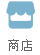
<style>
.page{position:relative;width:40px;height:55px;background:#ffffff}
.page>*{position:absolute;margin:0}
.t1{font:21.2px "SimSun";letter-spacing:0.075em;color:#666666;font-variant:small-caps}
</style>
<div class="page">
<p class="t1" style="left:8px;top:39px;width:24px;height:12px">商店</p>
</div>
